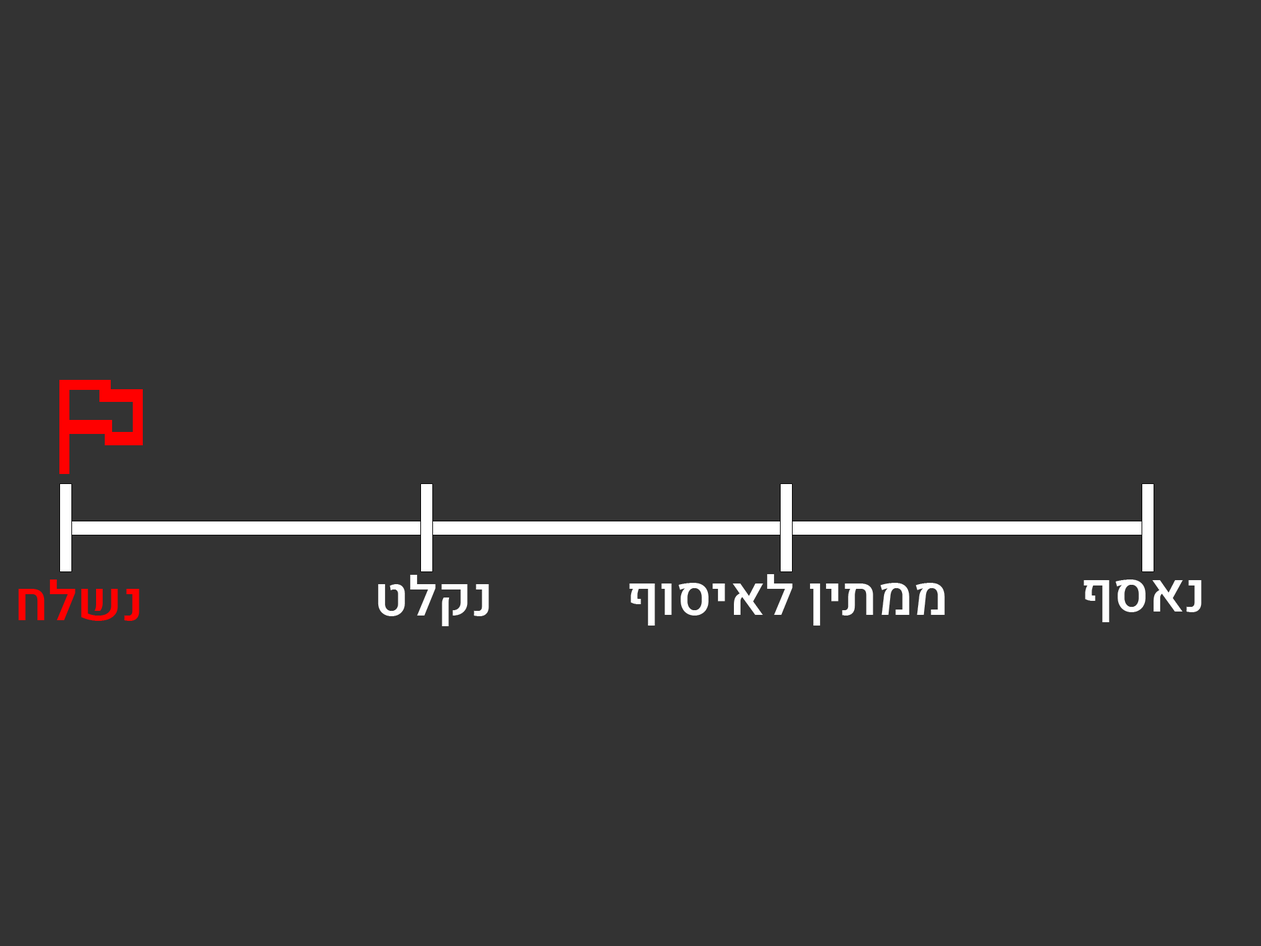
<style>
.page{position:relative;width:1261px;height:946px;background:#333333}
.page>*{position:absolute;margin:0}
.t1{font:54.1px "Heebo-Medium";color:#ff0000}
.t2{font:54.1px "Heebo-Medium";color:#fefefe}
.t3{font:54.1px "Heebo-Medium";color:#ffffff}
</style>
<div class="page">
<p class="t1" style="left:18px;top:579px;width:121px;height:42px">נשלח</p>
<p class="t2" style="left:378px;top:575px;width:111px;height:51px">נקלט</p>
<p class="t3" style="left:629px;top:574px;width:316px;height:51px">ממתין לאיסוף</p>
<p class="t3" style="left:1084px;top:579px;width:118px;height:43px">נאסף</p>
</div>
